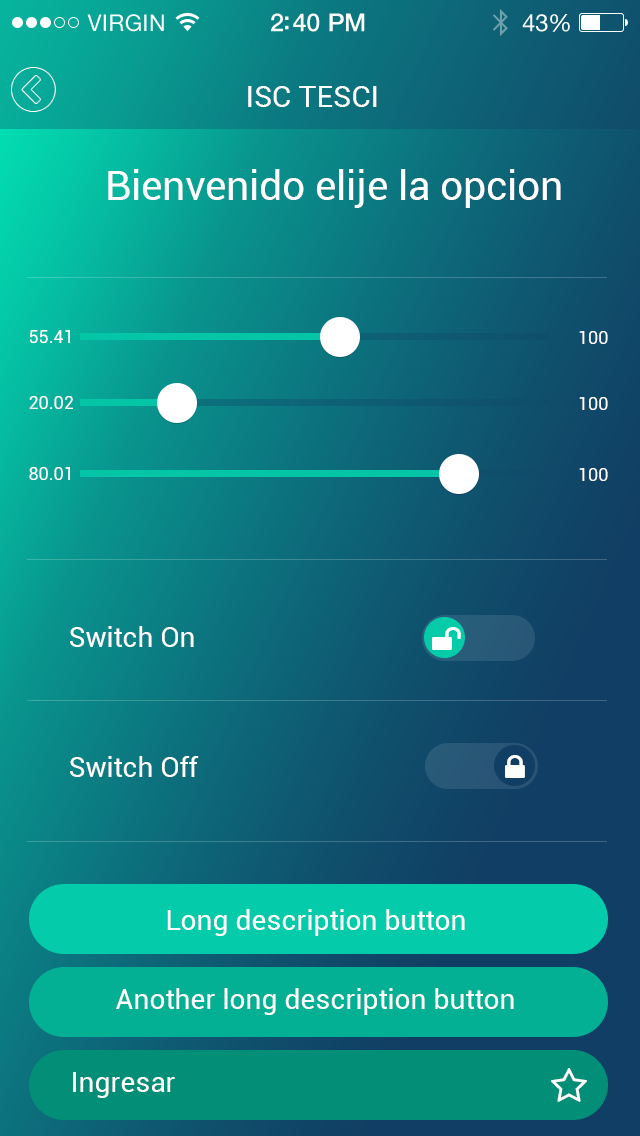
<style>
.page{position:relative;width:640px;height:1136px}
.page>*{position:absolute;margin:0}
.t1{font:30px "Roboto-Regular";color:#ffffff;text-transform:uppercase}
.t2{font:40.8px "Roboto-Regular";color:#ffffff}
.t3{font:18px "Roboto-Regular";color:#ffffff}
.t4{font:28px "Roboto-Regular";color:#ffffff}
</style>
<div class="page">
<p class="t1" style="left:248px;top:86px;width:129px;height:21px">ISC TESCI</p>
<p class="t2" style="left:108px;top:169px;width:453px;height:39px">Bienvenido elije la opcion</p>
<p class="t3" style="left:30px;top:330px;width:40px;height:14px">55.41</p>
<p class="t3" style="left:579px;top:331px;width:29px;height:13px">100</p>
<p class="t3" style="left:29px;top:396px;width:44px;height:13px">20.02</p>
<p class="t3" style="left:579px;top:397px;width:29px;height:13px">100</p>
<p class="t3" style="left:29px;top:467px;width:41px;height:13px">80.01</p>
<p class="t3" style="left:579px;top:468px;width:29px;height:13px">100</p>
<p class="t4" style="left:70px;top:626px;width:124px;height:21px">Switch On</p>
<p class="t4" style="left:70px;top:756px;width:129px;height:21px">Switch Off</p>
<p class="t4" style="left:167px;top:909px;width:298px;height:27px">Long description button</p>
<p class="t4" style="left:116px;top:988px;width:398px;height:27px">Another long description button</p>
<p class="t4" style="left:73px;top:1072px;width:102px;height:26px">Ingresar</p>
</div>
